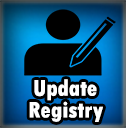
<style>
.page{position:relative;width:126px;height:128px;background:#000000}
.page>*{position:absolute;margin:0}
.t1{font:23.8px "TwCenMT-CondensedExtraBold";color:#ffffff}
.t2{font:23.6px "TwCenMT-CondensedExtraBold";color:#ffffff}
</style>
<div class="page">
<p class="t1" style="left:34px;top:79px;width:63px;height:22px">Update</p>
<p class="t2" style="left:29px;top:101px;width:74px;height:21px">Registry</p>
</div>
